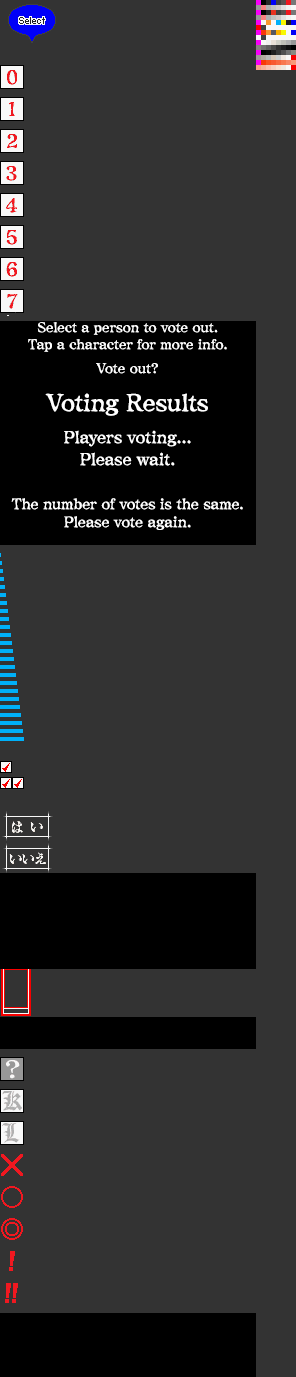
<style>
.page{position:relative;width:296px;height:1377px;background:#333333}
.page>*{position:absolute;margin:0}
.t1{font:14px/17px "ComicMysteryStd-DB";letter-spacing:-0.025em;color:#ffffff}
.t2{font:14px/24px "ComicMysteryStd-DB";letter-spacing:-0.025em;color:#ffffff}
.t3{font:24px/38px "ComicMysteryStd-DB";letter-spacing:-0.025em;color:#ffffff}
.t4{font:17px/32px "ComicMysteryStd-DB";letter-spacing:-0.025em;color:#ffffff}
.t5{font:17px/18px "ComicMysteryStd-DB";letter-spacing:-0.025em;color:#ffffff}
.t6{font:17px/22px "ComicMysteryStd-DB";letter-spacing:-0.025em;color:#ffffff}
.t7{font:15px/22px "ComicMysteryStd-DB";letter-spacing:-0.03em;color:#ffffff}
.t8{font:15px/18px "ComicMysteryStd-DB";letter-spacing:-0.025em;color:#ffffff}
</style>
<div class="page">
<p class="t1" style="left:11px;top:322px;width:232px;height:208px;text-align:center">Select a person to vote out.<br>Tap a character for more info.<br><span class="t2">Vote out?<br></span><span class="t3">Voting Results<br></span><span class="t4">Players voting..</span><span class="t5">.<br></span><span class="t6">Please wait.<br><br></span><span class="t7">The number of votes is the same.<br></span><span class="t8">Please vote again.</span></p>
</div>
